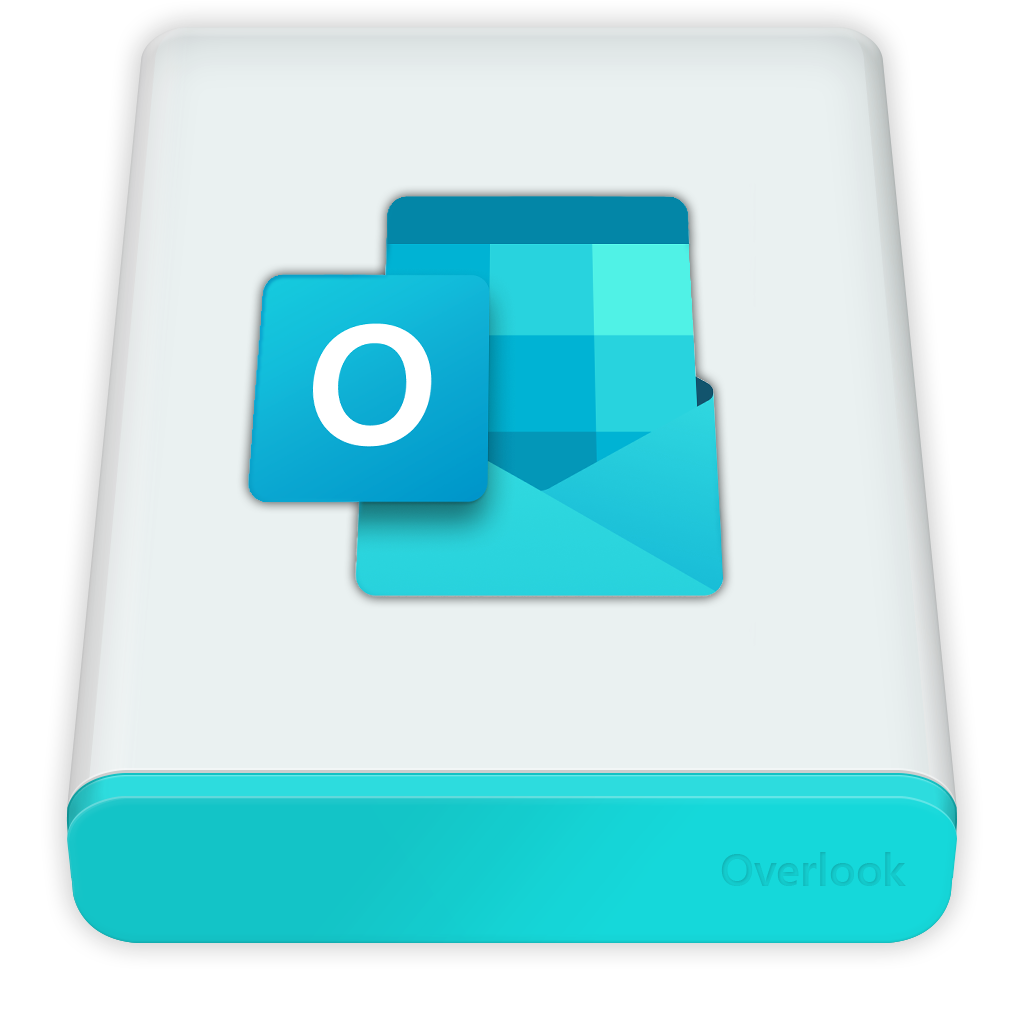
<style>
.page{position:relative;width:1024px;height:1024px;background:#eaf1f1}
.page>*{position:absolute;margin:0}
.t1{font:44.9px "SegoeUI-Semibold";color:#14cfd1}
</style>
<div class="page">
<p class="t1" style="left:721px;top:852px;width:185px;height:34px">Overlook</p>
</div>
